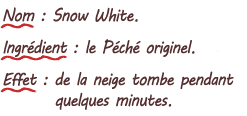
<style>
.page{position:relative;width:247px;height:116px;background:#ffffff}
.page>*{position:absolute;margin:0}
.t1{font:17.3px "MVBoli";letter-spacing:-0.05em;color:#553030;scale:0.9 1}
.t2{font:17.3px/32px "MVBoli";letter-spacing:-0.05em;color:#553030;scale:0.9 1}
</style>
<div class="page">
<p class="t1" style="left:3px;top:7px;width:231px;height:103px">Nom : Snow White.<br><span class="t2">Ingrédient </span>: le Péché originel.<br><span class="t2">Effet </span>: de la neige tombe pendant<br>        quelques minutes.</p>
</div>
